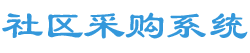
<style>
.page{position:relative;width:250px;height:53px;background:#ffffff}
.page>*{position:absolute;margin:0}
.t1{font:41px "STBaoliSC-Regular";color:#3498db}
</style>
<div class="page">
<p class="t1" style="left:2px;top:12px;width:246px;height:27px">社区采购系统</p>
</div>
